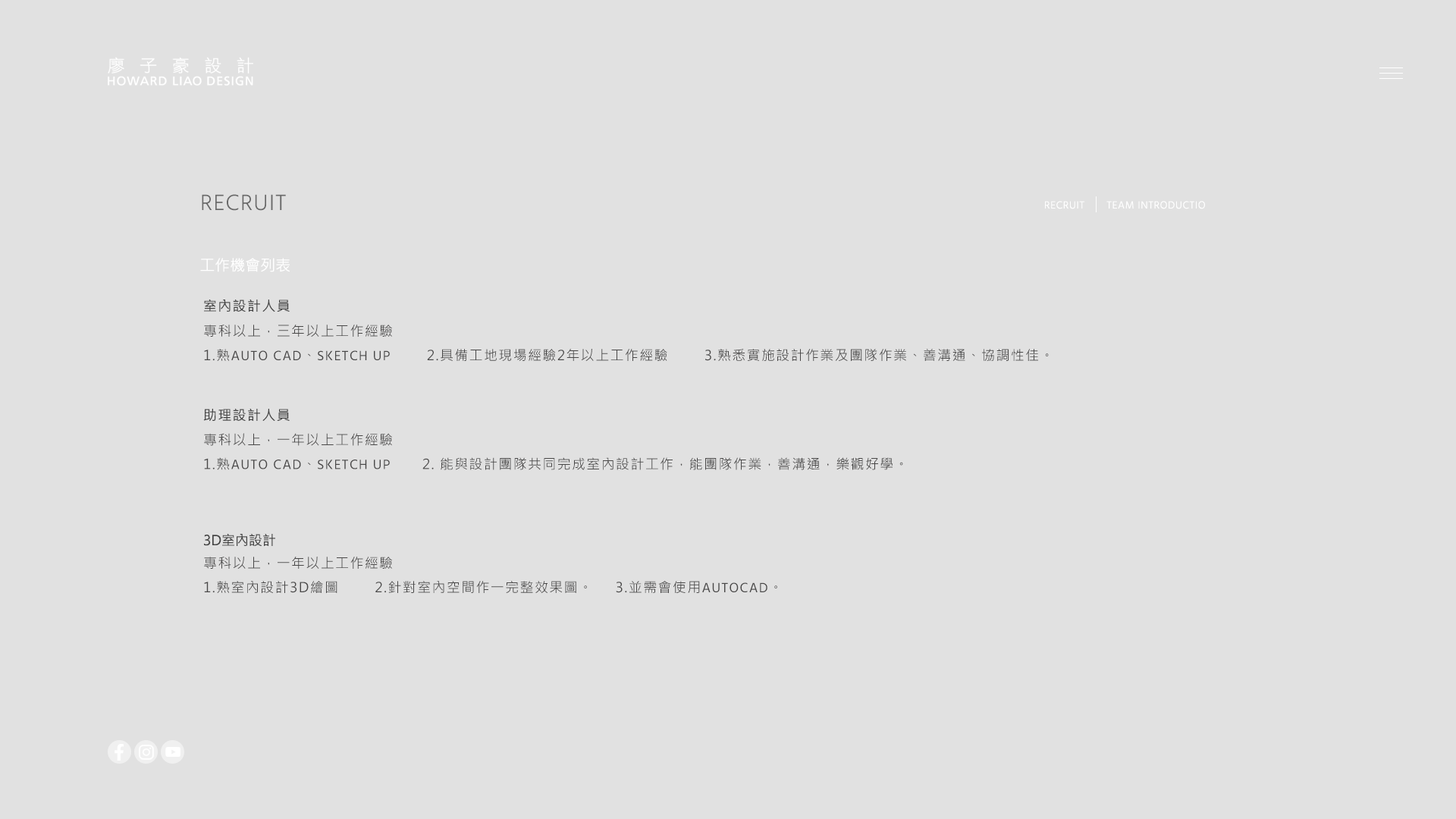
<style>
.page{position:relative;width:1456px;height:819px;background:#e1e1e1}
.page>*{position:absolute;margin:0}
.t1{font:22.7px "Hind-Light";letter-spacing:0.05em;color:#696969}
.t2{font:10.6px "Hind-Light";letter-spacing:0.05em;color:#ffffff}
.t3{font:15.2px "MicrosoftJhengHeiRegular";color:#ffffff}
.t4{font:13.6px "MicrosoftJhengHeiRegular";letter-spacing:0.075em;color:#414141}
.t5{font:13.6px/24.3px "MicrosoftJhengHeiRegular";letter-spacing:0.075em;color:#484747}
.t6{font:13.6px/22.7px "MicrosoftJhengHeiRegular";letter-spacing:0.075em;color:#414141}
.t7{font:13.6px/24.3px "Hind-Regular";letter-spacing:0.075em;color:#484747}
.t8{font:13.6px "MicrosoftJhengHeiRegular";color:#414141}
.t9{font:16.1px/26.8px "MicrosoftJhengHeiRegular";color:#414141}
</style>
<div class="page">
<p class="t1" style="left:202px;top:194px;width:84px;height:17px">RECRUIT</p>
<p class="t2" style="left:1045px;top:201px;width:160px;height:8px">RECRUIT       TEAM INTRODUCTIO</p>
<p class="t3" style="left:200px;top:258px;width:90px;height:14px">工作機會列表</p>
<p class="t4" style="left:204px;top:300px;width:86px;height:12px">室內設計人員</p>
<p class="t5" style="left:204px;top:325px;width:845px;height:36px"><span class="t6"><br></span>專科以上，三年以上工作經驗<br>1.熟<span class="t7">AUTO CAD</span>、<span class="t7">SKETCH UP</span>        2.具備工地現場經驗2年以上工作經驗        3.熟悉實施設計作業及團隊作業、善溝通、協調性佳。</p>
<p class="t4" style="left:203px;top:409px;width:87px;height:12px">助理設計人員</p>
<p class="t5" style="left:204px;top:433px;width:699px;height:37px"><span class="t6"><br></span>專科以上，一年以上工作經驗<br>1.熟<span class="t7">AUTO CAD</span>、<span class="t7">SKETCH UP</span>       2. 能與設計團隊共同完成室內設計工作，能團隊作業，善溝通，樂觀好學。</p>
<p class="t8" style="left:204px;top:534px;width:71px;height:12px">3D室內設計</p>
<p class="t5" style="left:204px;top:557px;width:573px;height:36px"><span class="t9"><br></span>專科以上，一年以上工作經驗<br>1.熟室內設計3D繪圖        2.針對室內空間作一完整效果圖。     3.並需會使用<span class="t7">AUTOCAD</span>。</p>
</div>
